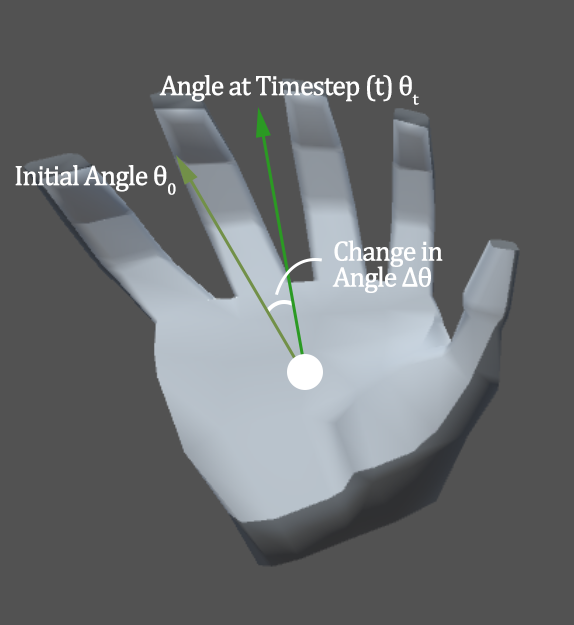
<style>
.page{position:relative;width:574px;height:625px;background:#525252}
.page>*{position:absolute;margin:0}
.t1{font:28px "Cambria";letter-spacing:-0.06em;color:#ffffff;font-weight:bold}
.t2{font:28px/26px "Cambria";letter-spacing:-0.06em;color:#ffffff;font-weight:bold}
</style>
<div class="page">
<p class="t1" style="left:159px;top:75px;width:260px;height:30px">Angle at Timestep (t) θt</p>
<p class="t1" style="left:15px;top:165px;width:161px;height:30px">Initial Angle θ0</p>
<p class="t2" style="left:332px;top:240px;width:111px;height:53px">Change in<br>Angle Δθ</p>
</div>
